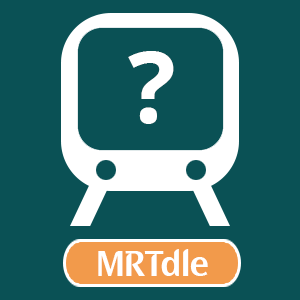
<style>
.page{position:relative;width:300px;height:300px;background:#0a5155}
.page>*{position:absolute;margin:0}
.t1{font:100px "OpenSans-Bold";color:#ffffff}
.t2{font:36px "LTAIdentity";color:#ffffff}
</style>
<div class="page">
<p class="t1" style="left:128px;top:51px;width:46px;height:73px">?</p>
<p class="t2" style="left:98px;top:249px;width:110px;height:27px">MRTdle</p>
</div>
